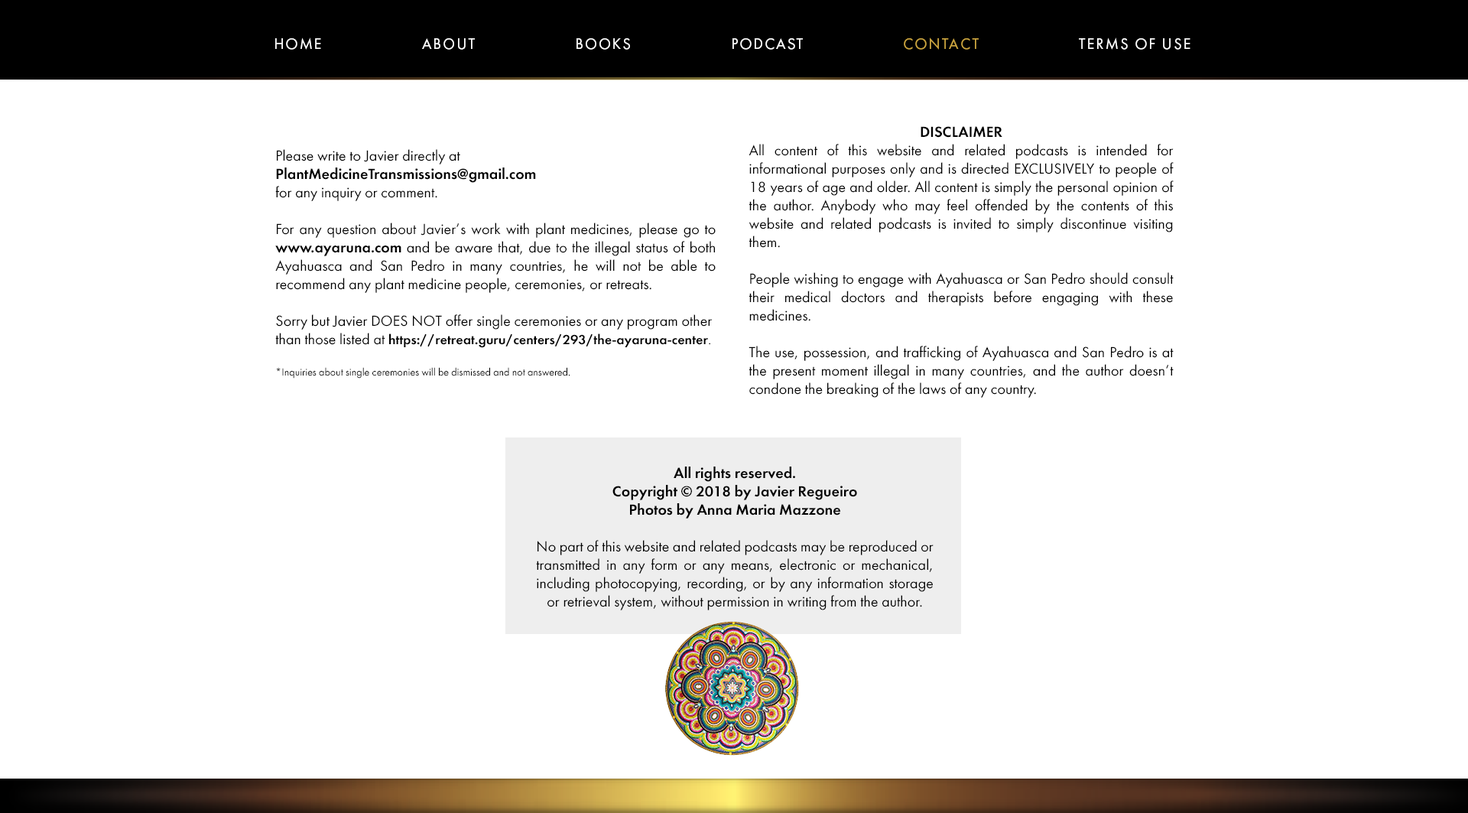
<style>
.page{position:relative;width:1468px;height:813px;background:#ffffff}
.page>*{position:absolute;margin:0}
.t1{font:15.3px "FuturaBookC";letter-spacing:0.107em;color:#ffffff;text-transform:uppercase}
.t2{font:15.3px "FuturaBookC";letter-spacing:0.107em;color:#c9a33f;text-transform:uppercase}
.t3{font:15.3px "FuturaBookC";color:#000000}
.t4{font:15.3px "FuturaDemiC";color:#000000}
.t5{font:13.8px "FuturaDemiC";color:#000000}
.t6{font:13.8px "FuturaBookC";color:#000000}
.t7{font:10.7px "FuturaBookC";color:#000000}
</style>
<div class="page">
<p class="t1" style="left:275px;top:37px;width:915px;height:13px">Home                   About                   Books                   Podcast                   <span class="t2">Contact</span>                   Terms of Use</p>
<p class="t3" style="left:748px;top:126px;width:425px;height:271px;text-align:center"><span class="t4">DISCLAIMER<br></span>All content of this website and related podcasts is intended for informational purposes only and is directed EXCLUSIVELY to people of 18 years of age and older. All content is simply the personal opinion of the author. Anybody who may feel offended by the contents of this website and related podcasts is invited to simply discontinue visiting them.<br><br>People wishing to engage with Ayahuasca or San Pedro should consult their medical doctors and therapists before engaging with these medicines.<br><br>The use, possession, and trafficking of Ayahuasca and San Pedro is at the present moment illegal in many countries, and the author doesn’t condone the breaking of the laws of any country.</p>
<p class="t3" style="left:275px;top:149px;width:440px;height:229px">Please write to Javier directly at <span class="t4">PlantMedicineTransmissions@gmail.com<br></span>for any inquiry or comment.<br> <br>For any question about Javier’s work with plant medicines, please go to <span class="t4">www.ayaruna.com</span> and be aware that, due to the illegal status of both Ayahuasca and San Pedro in many countries, he will not be able to recommend any plant medicine people, ceremonies, or retreats.<br> <br>Sorry but Javier DOES NOT offer single ceremonies or any program other than those listed at <span class="t5">https://retreat.guru/centers/293/the-ayaruna-center</span><span class="t6">. <br><br></span><span class="t7">*Inquiries about single ceremonies will be dismissed and not answered.</span></p>
<p class="t3" style="left:536px;top:466px;width:397px;height:144px;text-align:justify"><span class="t4">All rights reserved.<br>Copyright © 2018 by Javier Regueiro<br>Photos by Anna Maria Mazzone<br><br></span>No part of this website and related podcasts may be reproduced or transmitted in any form or any means, electronic or mechanical, including photocopying, recording, or by any information storage or retrieval system, without permission in writing from the author.</p>
</div>
